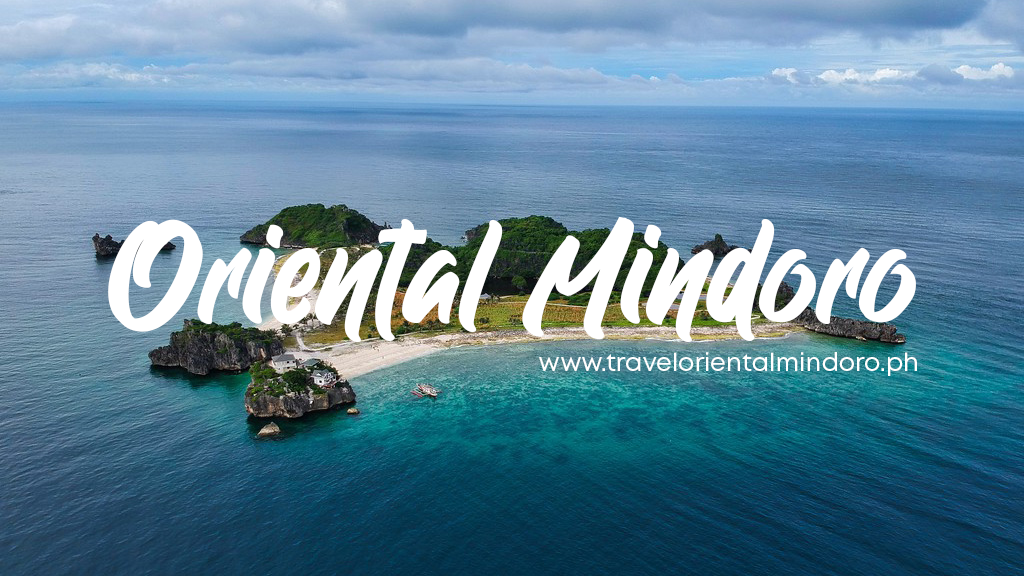
<style>
.page{position:relative;width:1024px;height:576px}
.page>*{position:absolute;margin:0}
.t1{font:149.4px "RollingBold-PersonalUse";color:#ffffff}
.t2{font:24.8px "Mont-Regular";color:#ffffff}
</style>
<div class="page">
<p class="t1" style="left:108px;top:217px;width:808px;height:125px">Oriental Mindoro</p>
<p class="t2" style="left:539px;top:352px;width:378px;height:24px">www.travelorientalmindoro.ph</p>
</div>
